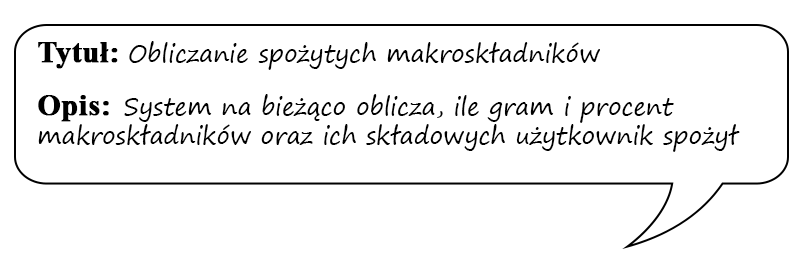
<style>
.page{position:relative;width:800px;height:260px;background:#ffffff}
.page>*{position:absolute;margin:0}
.t1{font:24px "SegoePrint";color:#000000}
.t2{font:30px "TimesNewRomanPS-BoldMT";color:#000000;font-weight:bold}
</style>
<div class="page">
<p class="t1" style="left:38px;top:41px;width:702px;height:111px"><span class="t2">Tytuł: </span>Obliczanie spożytych makroskładników<br><br><span class="t2">Opis:  </span>System na bieżąco oblicza, ile gram i procent makroskładników oraz ich składowych użytkownik spożył</p>
</div>
